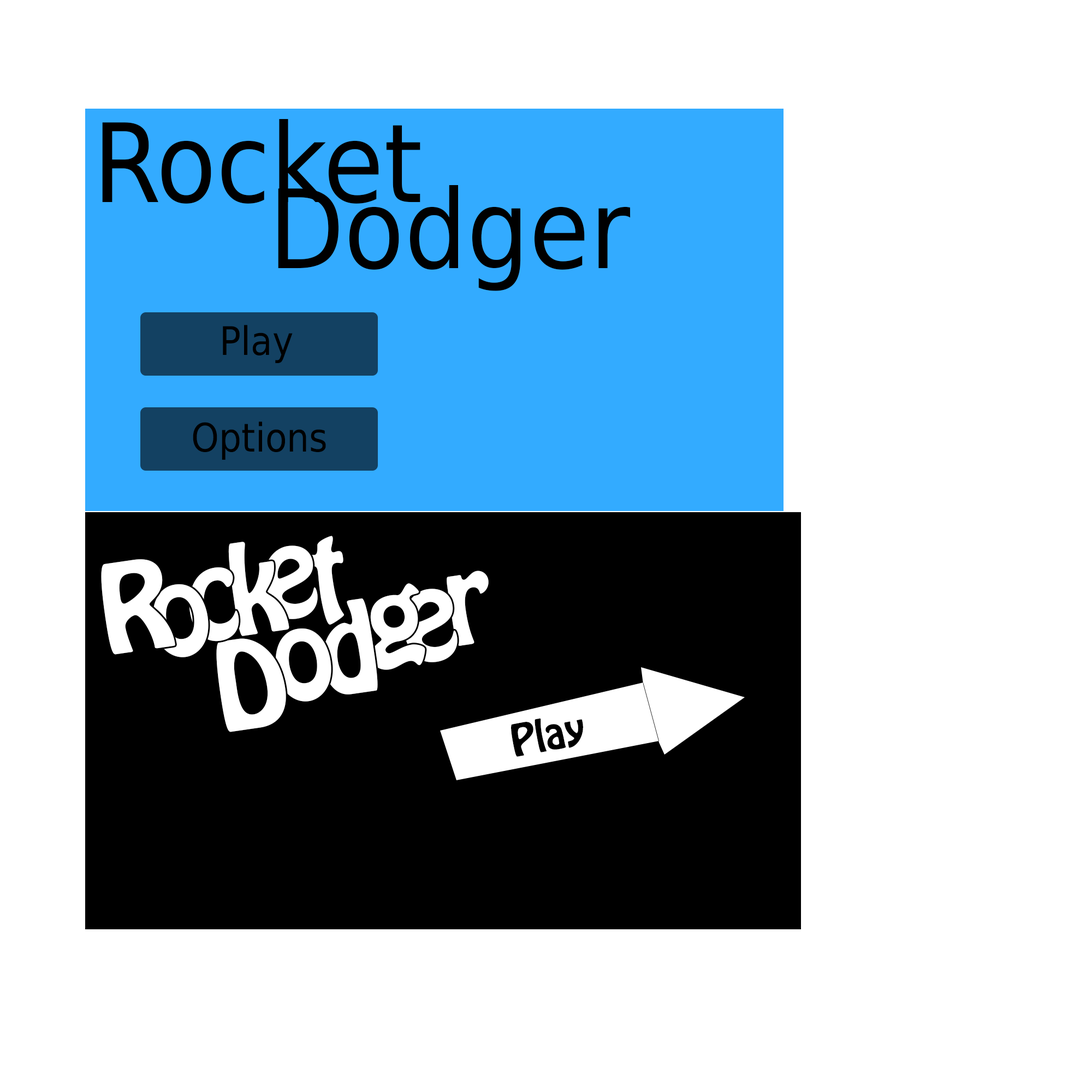
<style>
.page{position:relative;width:1092px;height:1092px;background:#ffffff}
.page>*{position:absolute;margin:0}
.t1{font:109.2px/66.1px "DejaVuSansCondensed";color:#000000}
.t2{font:39.3px "DejaVuSansCondensed";color:#000000}
.t3{font:109.2px "HoboStd";letter-spacing:-0.1em;color:#ffffff}
.t4{font:39.3px "HoboStd";color:#000000}
</style>
<div class="page">
<p class="t1" style="left:102px;top:119px;width:529px;height:172px">Rocket  <br>      Dodger</p>
<p class="t2" style="left:223px;top:325px;width:70px;height:38px">Play</p>
<p class="t2" style="left:193px;top:422px;width:133px;height:38px">Options</p>
<p class="t3" style="left:228px;top:542px;width:61px;height:94px;rotate:-8deg">k</p>
<p class="t3" style="left:264px;top:545px;width:54px;height:74px;rotate:-8deg">e</p>
<p class="t3" style="left:307px;top:536px;width:38px;height:89px;rotate:-8deg">t</p>
<p class="t3" style="left:101px;top:559px;width:74px;height:96px;rotate:-8deg">R</p>
<p class="t3" style="left:189px;top:567px;width:50px;height:75px;rotate:-8deg">c</p>
<p class="t3" style="left:447px;top:571px;width:42px;height:75px;rotate:-8deg">r</p>
<p class="t3" style="left:152px;top:584px;width:57px;height:73px;rotate:-8deg">o</p>
<p class="t3" style="left:370px;top:583px;width:55px;height:87px;rotate:-8deg">g</p>
<p class="t3" style="left:403px;top:589px;width:55px;height:73px;rotate:-8deg">e</p>
<p class="t3" style="left:323px;top:598px;width:55px;height:97px;rotate:-8deg">d</p>
<p class="t3" style="left:275px;top:628px;width:56px;height:74px;rotate:-8deg">o</p>
<p class="t3" style="left:216px;top:638px;width:70px;height:94px;rotate:-8deg">D</p>
<p class="t4" style="left:511px;top:718px;width:72px;height:39px;rotate:-11deg">Play</p>
</div>
